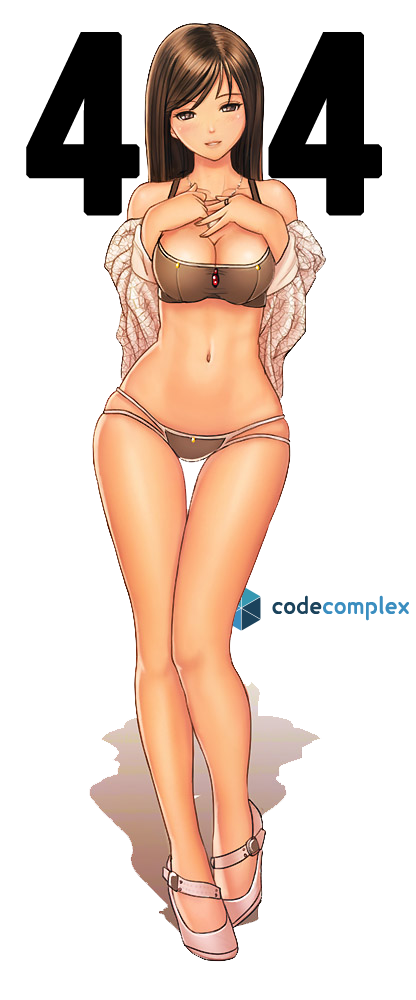
<style>
.page{position:relative;width:416px;height:1000px;background:#ffffff}
.page>*{position:absolute;margin:0}
.t1{font:247.3px "OpenSans-CondensedBold";color:#000000;font-weight:bold}
.t2{font:22.7px "Lexia-Bold";color:#3b8ec0}
.t3{font:22.7px "Lexia-Bold";color:#1b435c}
</style>
<div class="page">
<p class="t1" style="left:26px;top:29px;width:356px;height:189px">404</p>
<p class="t2" style="left:272px;top:595px;width:137px;height:26px"><span class="t3">code</span>complex</p>
</div>
